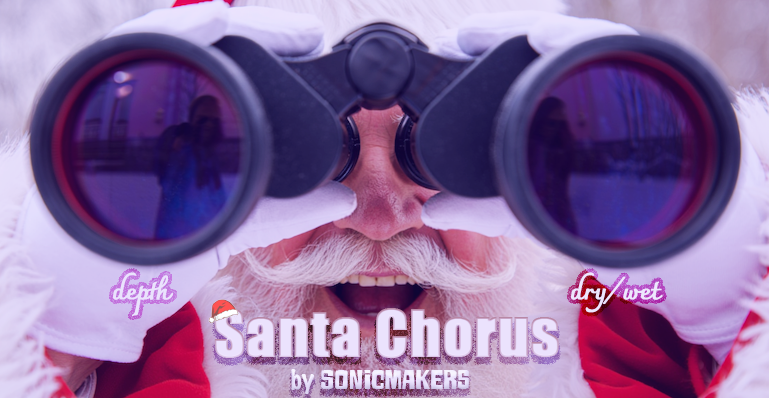
<style>
.page{position:relative;width:769px;height:398px}
.page>*{position:absolute;margin:0}
.t1{font:25px "Charmonman-Bold";color:#eae2fd;font-weight:bold}
.t2{font:25px "Charmonman-Bold";color:#fcfcfc;font-weight:bold}
.t3{font:60px "Impact";color:#ebe2fd;font-weight:bold}
.t4{font:26px "ArmagedaWide";color:#e9e2fc}
.t5{font:26px "MarkerFelt-Thin";color:#e9e2fc}
</style>
<div class="page">
<p class="t1" style="left:113px;top:272px;width:60px;height:44px">depth</p>
<p class="t2" style="left:571px;top:272px;width:92px;height:41px">dry/wet</p>
<p class="t3" style="left:214px;top:308px;width:345px;height:50px">Santa Chorus</p>
<p class="t4" style="left:291px;top:369px;width:178px;height:25px"><span class="t5">by </span>Sonicmakers</p>
</div>
